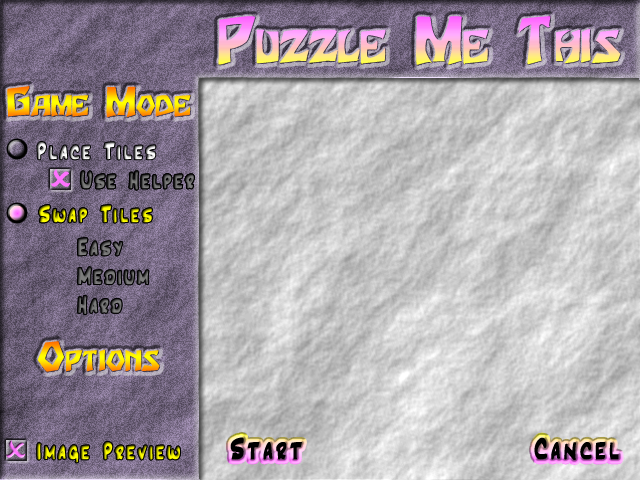
<style>
.page{position:relative;width:640px;height:480px}
.page>*{position:absolute;margin:0}
.t1{font:54px "Houters-Normal";font-variant:small-caps;font-weight:bold}
.t2{font:34px "Houters-Normal";font-variant:small-caps;font-weight:bold}
.t3{font:24px "Inkpen2Script";letter-spacing:0.1em;font-weight:bold}
.t4{font:30px "Inkpen2Script";letter-spacing:0.1em;color:#000000;font-weight:bold}
</style>
<div class="page">
<p class="t1" style="left:218px;top:16px;width:403px;height:49px">Puzzle Me This</p>
<p class="t2" style="left:7px;top:85px;width:184px;height:33px">Game Mode</p>
<p class="t3" style="left:37px;top:142px;width:119px;height:18px">Place Tiles</p>
<p class="t3" style="left:39px;top:205px;width:113px;height:18px">Swap Tiles</p>
<p class="t3" style="left:39px;top:205px;width:113px;height:18px">Swap Tiles</p>
<p class="t2" style="left:38px;top:341px;width:122px;height:31px">Options</p>
<p class="t4" style="left:230px;top:437px;width:389px;height:23px">Start                 Cancel</p>
<p class="t3" style="left:37px;top:442px;width:143px;height:21px">Image Preview</p>
<p class="t3" style="left:37px;top:442px;width:143px;height:21px">Image Preview</p>
</div>
